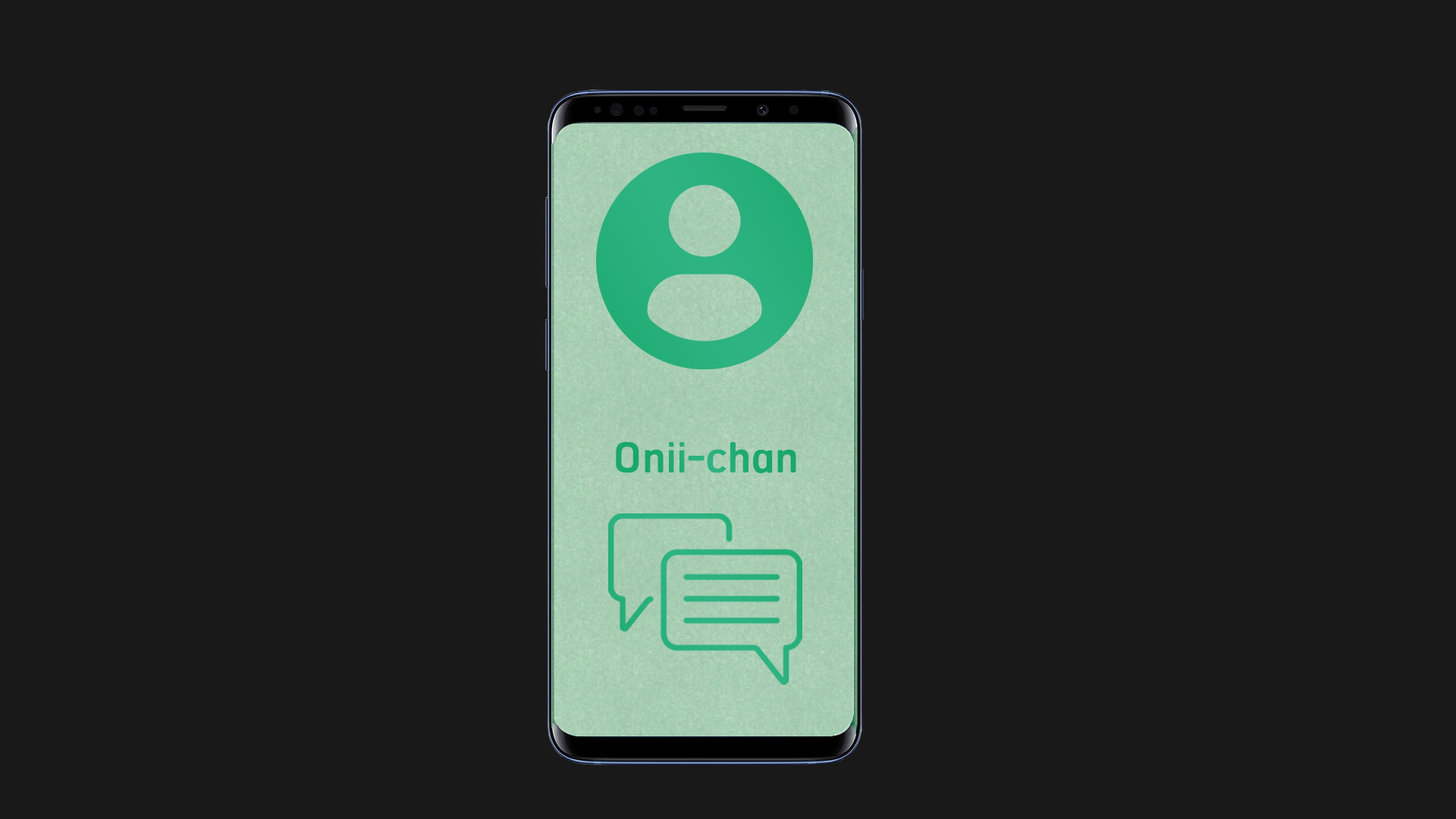
<style>
.page{position:relative;width:1456px;height:819px;background:#191919}
.page>*{position:absolute;margin:0}
.t1{font:54.6px "RSU-Bold";color:#19a86c}
</style>
<div class="page">
<p class="t1" style="left:616px;top:441px;width:180px;height:32px">Onii-chan</p>
</div>
